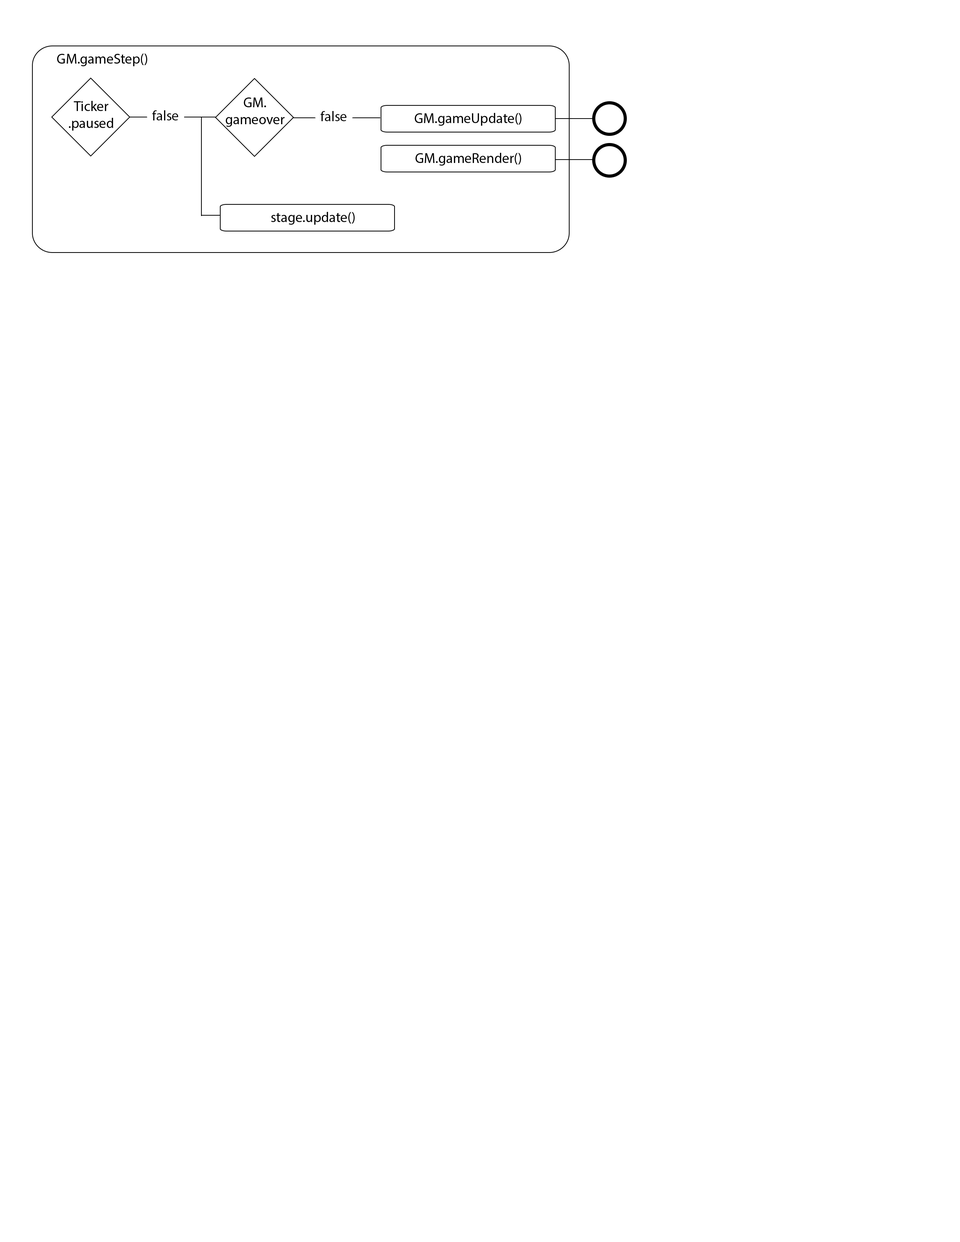
<style>
.page{position:relative;width:960px;height:1242px;background:#ffffff}
.page>*{position:absolute;margin:0}
.t1{font:14.1px "MyriadPro-Regular";color:#000000}
</style>
<div class="page">
<p class="t1" style="left:57px;top:53px;width:90px;height:13px">GM.gameStep()</p>
<p class="t1" style="left:69px;top:101px;width:44px;height:30px;text-align:center">Ticker<br>.paused</p>
<p class="t1" style="left:225px;top:97px;width:60px;height:30px;text-align:center">GM.<br>gameover</p>
<p class="t1" style="left:152px;top:110px;width:26px;height:10px">false</p>
<p class="t1" style="left:320px;top:111px;width:27px;height:10px">false</p>
<p class="t1" style="left:414px;top:113px;width:107px;height:13px">GM.gameUpdate()</p>
<p class="t1" style="left:415px;top:153px;width:106px;height:13px">GM.gameRender()</p>
<p class="t1" style="left:271px;top:212px;width:84px;height:13px">stage.update()</p>
</div>
